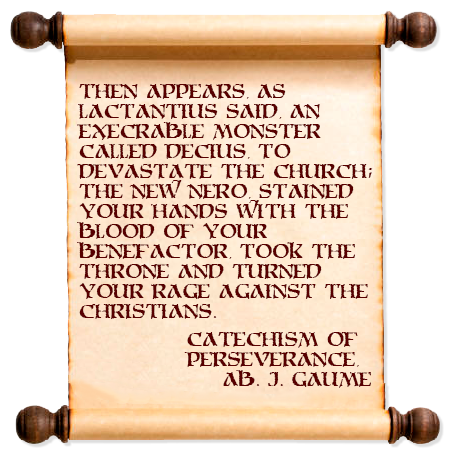
<style>
.page{position:relative;width:451px;height:456px;background:#ffffff}
.page>*{position:absolute;margin:0}
.t1{font:16.7px "MoriaCitadel";color:#580000}
</style>
<div class="page">
<p class="t1" style="left:77px;top:84px;width:296px;height:235px">Then appears, as<br>Lactantius said, an<br>execrable monster<br>called Decius, to<br>devastate the Church;<br>the new Nero, stained<br>your hands with the<br>blood of your<br>benefactor, took the<br>throne and turned<br>your rage against the<br>christians.</p>
<p class="t1" style="left:184px;top:332px;width:187px;height:56px">Catechism of<br>Perseverance,<br> Ab. J. Gaume</p>
</div>
